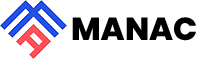
<style>
.page{position:relative;width:202px;height:59px;background:#ffffff}
.page>*{position:absolute;margin:0}
.t1{font:31.8px "Poppins-ExtraBold";color:#000000}
</style>
<div class="page">
<p class="t1" style="left:72px;top:17px;width:124px;height:24px">MANAC</p>
</div>
